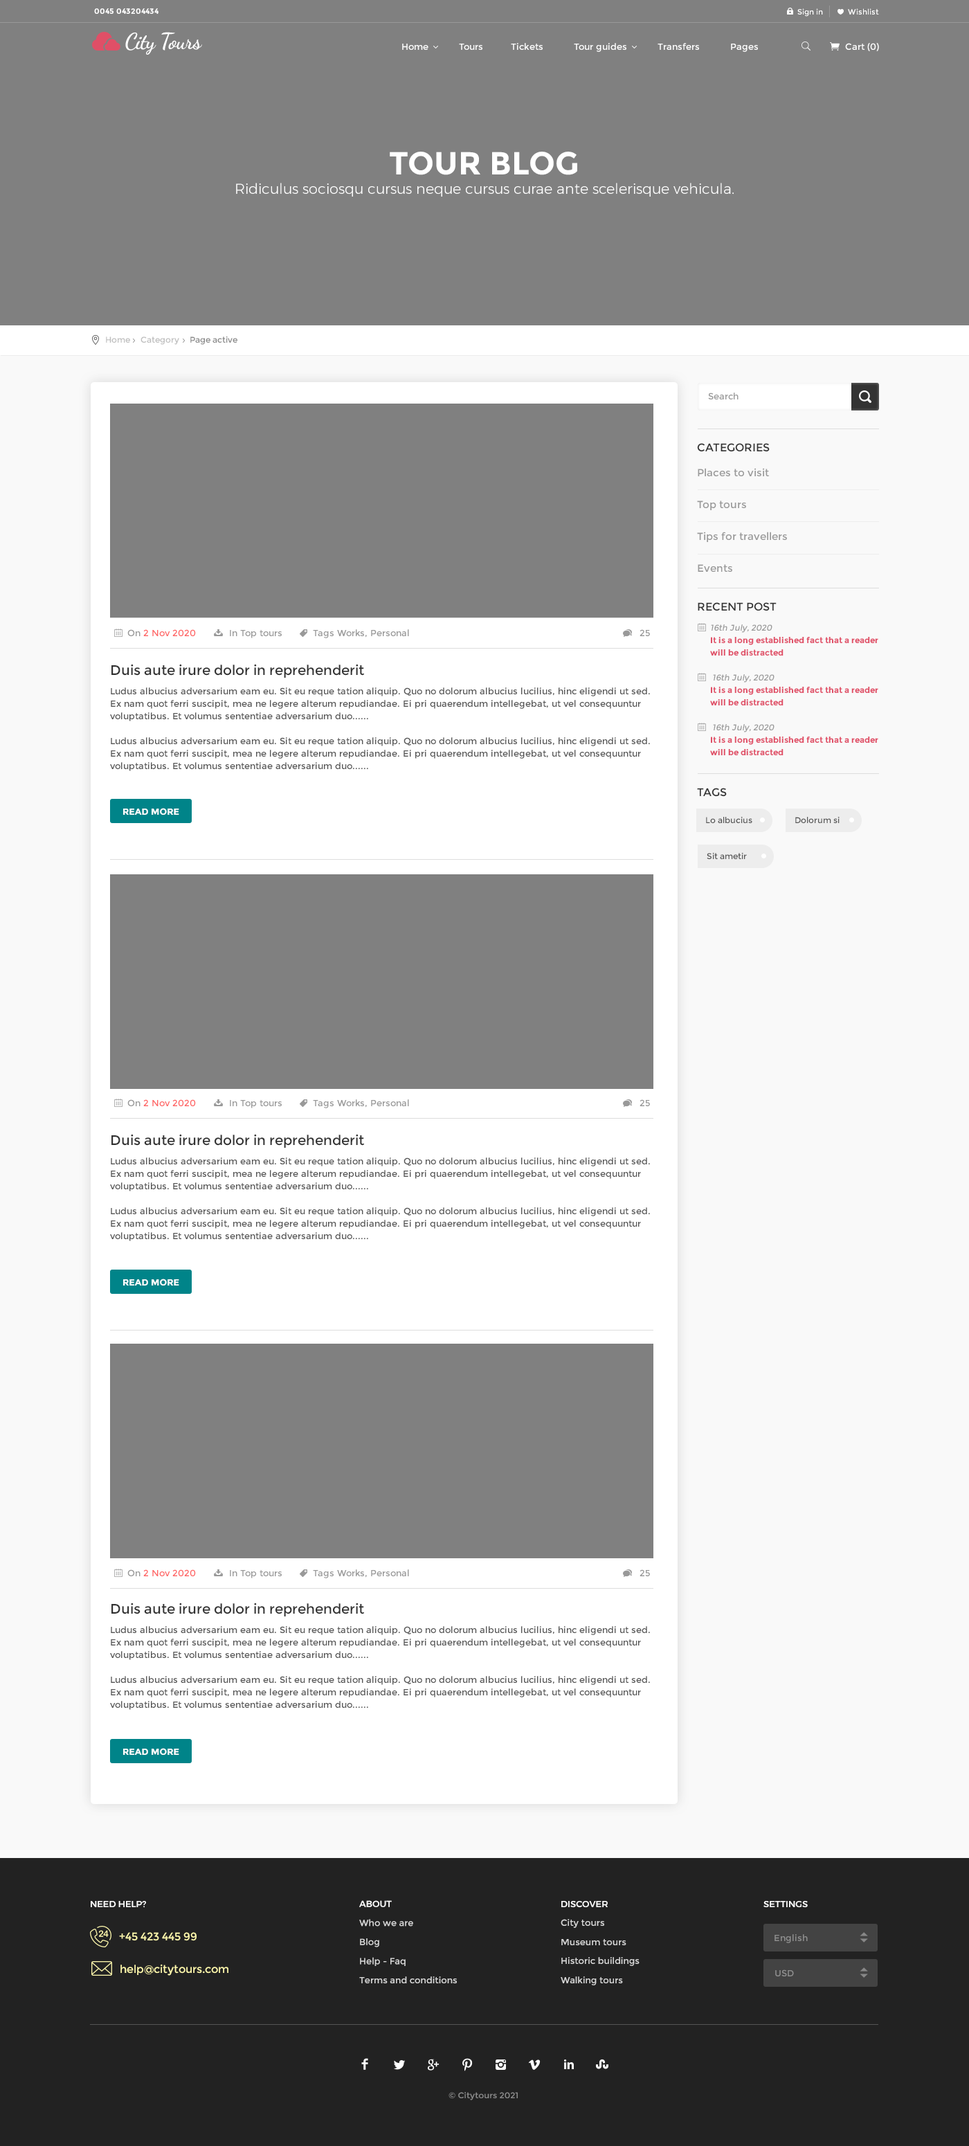
<style>
.page{position:relative;width:969px;height:2146px;background:#808080}
.page>*{position:absolute;margin:0}
.t1{font:7.6px "Montserrat-Bold";color:#ffffff}
.t2{font:7.6px "Montserrat-Regular";color:#ffffff}
.t3{font:22.2px "DancingScript-Bold";letter-spacing:-0.025em;color:#ffffff}
.t4{font:9px "Montserrat-Regular";color:#ffffff}
.t5{font:31.8px "Montserrat-Bold";color:#ffffff}
.t6{font:14.5px "Montserrat-Light";color:#ffffff}
.t7{font:8.3px "Montserrat-Regular";color:#bebebe}
.t8{font:8.3px "Montserrat-Regular";color:#888888}
.t9{font:9px "Montserrat-Regular";color:#999999}
.t10{font:10.4px/31.8px "Montserrat-Regular";color:#999999}
.t11{font:11.1px/16.6px "Montserrat-Regular";color:#333333}
.t12{font:10.4px/24.9px "Montserrat-Regular";color:#999999}
.t13{font:11.1px "Montserrat-Regular";color:#333333}
.t14{font:9px "Montserrat-Regular";color:#ff6666}
.t15{font:8.3px/12.5px "Montserrat-Bold";color:#e04f67}
.t16{font:8.3px/12.5px "Montserrat-Regular";color:#999999;font-style:italic}
.t17{font:9px/12.5px "Montserrat-Regular";color:#555555}
.t18{font:13.8px/12.5px "Montserrat-Regular";color:#333333}
.t19{font:9px/19.4px "Montserrat-Regular";color:#555555}
.t20{font:9px "Montserrat-Bold";color:#ffffff;text-transform:uppercase}
.t21{font:8.3px "Montserrat-Regular";color:#555555}
.t22{font:9px "Montserrat-Medium";color:#ffffff;text-transform:uppercase}
.t23{font:9px "Montserrat-Regular";color:#d8d8d8}
.t24{font:9px/8.3px "Montserrat-Medium";color:#ffffff;text-transform:uppercase}
.t25{font:11.1px "Montserrat-Regular";color:#fdf7ac}
.t26{font:9px "Montserrat-Regular";color:#8e8e8e}
.t27{font:8.2px "Montserrat-Regular";color:#8c8c8c;scale:1.04 1}
</style>
<div class="page">
<p class="t1" style="left:94px;top:8px;width:65px;height:6px">0045 043204434</p>
<p class="t2" style="left:798px;top:8px;width:81px;height:9px">Sign in            Wishlist</p>
<p class="t3" style="left:125px;top:32px;width:77px;height:23px">City Tours</p>
<p class="t4" style="left:402px;top:43px;width:356px;height:9px">Home           Tours          Tickets           Tour guides           Transfers           Pages</p>
<p class="t4" style="left:845px;top:43px;width:34px;height:8px">Cart (0)</p>
<p class="t5" style="left:390px;top:152px;width:187px;height:23px">TOUR BLOG</p>
<p class="t6" style="left:236px;top:183px;width:498px;height:14px">Ridiculus sociosqu cursus neque cursus curae ante scelerisque vehicula.</p>
<p class="t7" style="left:106px;top:336px;width:131px;height:9px">Home     Category     <span class="t8">Page active</span></p>
<p class="t9" style="left:708px;top:393px;width:31px;height:6px">Search</p>
<p class="t10" style="left:697px;top:443px;width:90px;height:129px"><span class="t11">CATEGORIES<br></span><span class="t12">Places to visit<br></span>Top tours<br>Tips for travellers<br>Events</p>
<p class="t13" style="left:698px;top:602px;width:79px;height:9px">RECENT POST</p>
<p class="t9" style="left:127px;top:629px;width:523px;height:9px">On <span class="t14">2 Nov 2020</span>            In Top tours           Tags Works, Personal               25</p>
<p class="t15" style="left:710px;top:624px;width:169px;height:131px"><span class="t16">16th July, 2020<br></span>It is a long established fact that a reader will be distracted<br><br><span class="t16"> 16th July, 2020<br></span>It is a long established fact that a reader will be distracted<br><br><span class="t16"> 16th July, 2020<br></span>It is a long established fact that a reader will be distracted</p>
<p class="t17" style="left:110px;top:664px;width:540px;height:107px"><span class="t18">Duis aute irure dolor in reprehenderit<br></span><span class="t19">Ludus albucius adversarium eam eu. Sit eu reque tation aliquip. Quo no dolorum albucius lucilius, hinc eligendi ut sed. </span>Ex nam quot ferri suscipit, mea ne legere alterum repudiandae. Ei pri quaerendum intellegebat, ut vel consequuntur voluptatibus. Et volumus sententiae adversarium duo......<br><br>Ludus albucius adversarium eam eu. Sit eu reque tation aliquip. Quo no dolorum albucius lucilius, hinc eligendi ut sed. Ex nam quot ferri suscipit, mea ne legere alterum repudiandae. Ei pri quaerendum intellegebat, ut vel consequuntur voluptatibus. Et volumus sententiae adversarium duo......</p>
<p class="t13" style="left:697px;top:788px;width:30px;height:9px">TAGS</p>
<p class="t20" style="left:123px;top:808px;width:56px;height:7px">READ MORE</p>
<p class="t21" style="left:706px;top:817px;width:47px;height:6px">Lo albucius</p>
<p class="t21" style="left:795px;top:817px;width:45px;height:6px">Dolorum si</p>
<p class="t21" style="left:707px;top:853px;width:40px;height:6px">Sit ametir</p>
<p class="t9" style="left:127px;top:1099px;width:523px;height:9px">On <span class="t14">2 Nov 2020</span>            In Top tours           Tags Works, Personal               25</p>
<p class="t17" style="left:110px;top:1134px;width:540px;height:107px"><span class="t18">Duis aute irure dolor in reprehenderit<br></span><span class="t19">Ludus albucius adversarium eam eu. Sit eu reque tation aliquip. Quo no dolorum albucius lucilius, hinc eligendi ut sed. </span>Ex nam quot ferri suscipit, mea ne legere alterum repudiandae. Ei pri quaerendum intellegebat, ut vel consequuntur voluptatibus. Et volumus sententiae adversarium duo......<br><br>Ludus albucius adversarium eam eu. Sit eu reque tation aliquip. Quo no dolorum albucius lucilius, hinc eligendi ut sed. Ex nam quot ferri suscipit, mea ne legere alterum repudiandae. Ei pri quaerendum intellegebat, ut vel consequuntur voluptatibus. Et volumus sententiae adversarium duo......</p>
<p class="t20" style="left:123px;top:1279px;width:56px;height:7px">READ MORE</p>
<p class="t9" style="left:127px;top:1569px;width:523px;height:9px">On <span class="t14">2 Nov 2020</span>            In Top tours           Tags Works, Personal               25</p>
<p class="t17" style="left:110px;top:1603px;width:540px;height:107px"><span class="t18">Duis aute irure dolor in reprehenderit<br></span><span class="t19">Ludus albucius adversarium eam eu. Sit eu reque tation aliquip. Quo no dolorum albucius lucilius, hinc eligendi ut sed. </span>Ex nam quot ferri suscipit, mea ne legere alterum repudiandae. Ei pri quaerendum intellegebat, ut vel consequuntur voluptatibus. Et volumus sententiae adversarium duo......<br><br>Ludus albucius adversarium eam eu. Sit eu reque tation aliquip. Quo no dolorum albucius lucilius, hinc eligendi ut sed. Ex nam quot ferri suscipit, mea ne legere alterum repudiandae. Ei pri quaerendum intellegebat, ut vel consequuntur voluptatibus. Et volumus sententiae adversarium duo......</p>
<p class="t20" style="left:123px;top:1748px;width:56px;height:7px">READ MORE</p>
<p class="t22" style="left:91px;top:1901px;width:55px;height:7px">Need help?</p>
<p class="t23" style="left:359px;top:1900px;width:98px;height:83px"><span class="t24">About<br></span>Who we are<br>Blog<br>Help - Faq<br>Terms and conditions</p>
<p class="t23" style="left:561px;top:1901px;width:79px;height:85px"><span class="t24">Discover<br></span>City tours<br>Museum tours<br>Historic buildings<br>Walking tours</p>
<p class="t22" style="left:764px;top:1901px;width:44px;height:7px">Settings</p>
<p class="t25" style="left:119px;top:1932px;width:78px;height:9px">+45 423 445 99</p>
<p class="t26" style="left:775px;top:1934px;width:33px;height:9px">English</p>
<p class="t25" style="left:120px;top:1964px;width:108px;height:12px">help@citytours.com</p>
<p class="t26" style="left:775px;top:1970px;width:19px;height:7px">USD</p>
<p class="t27" style="left:449px;top:2092px;width:69px;height:8px">© Citytours 2021</p>
</div>
